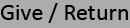
<style>
.page{position:relative;width:130px;height:28px;background:#acacac}
.page>*{position:absolute;margin:0}
.t1{font:24px "Calibri";color:#000000}
</style>
<div class="page">
<p class="t1" style="left:1px;top:3px;width:127px;height:20px">Give / Return</p>
</div>
